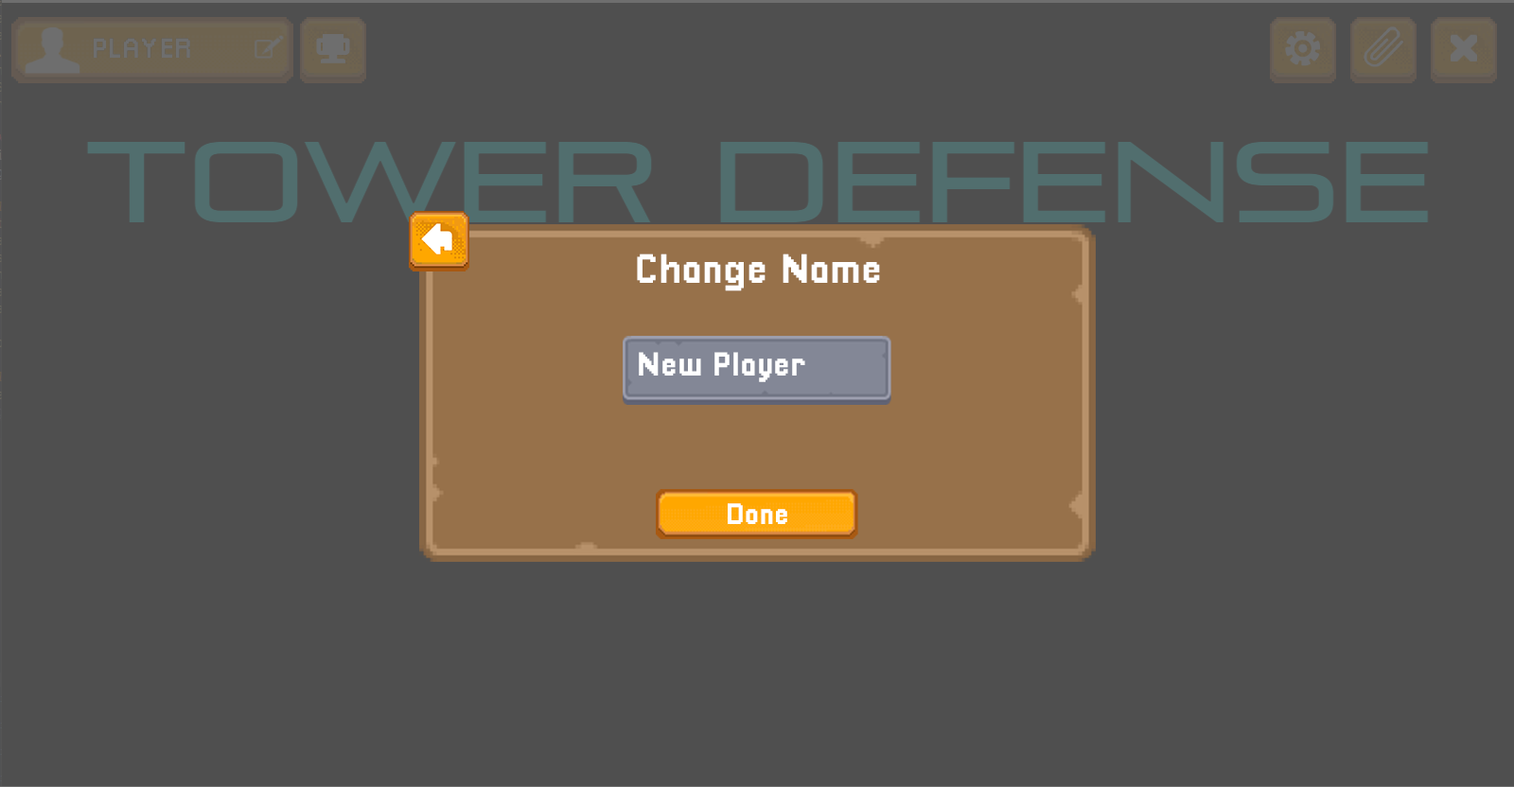
<style>
.page{position:relative;width:1514px;height:787px;background:#4f4f4f}
.page>*{position:absolute;margin:0}
.t1{font:41.6px "Pixellari";color:#ffffff}
.t2{font:33.5px "Pixellari";color:#ffffff}
.t3{font:29.8px "Pixellari";color:#ffffff}
</style>
<div class="page">
<p class="t1" style="left:637px;top:254px;width:243px;height:38px">Change Name</p>
<p class="t2" style="left:639px;top:352px;width:166px;height:30px">New Player</p>
<p class="t3" style="left:728px;top:504px;width:59px;height:20px">Done</p>
</div>
